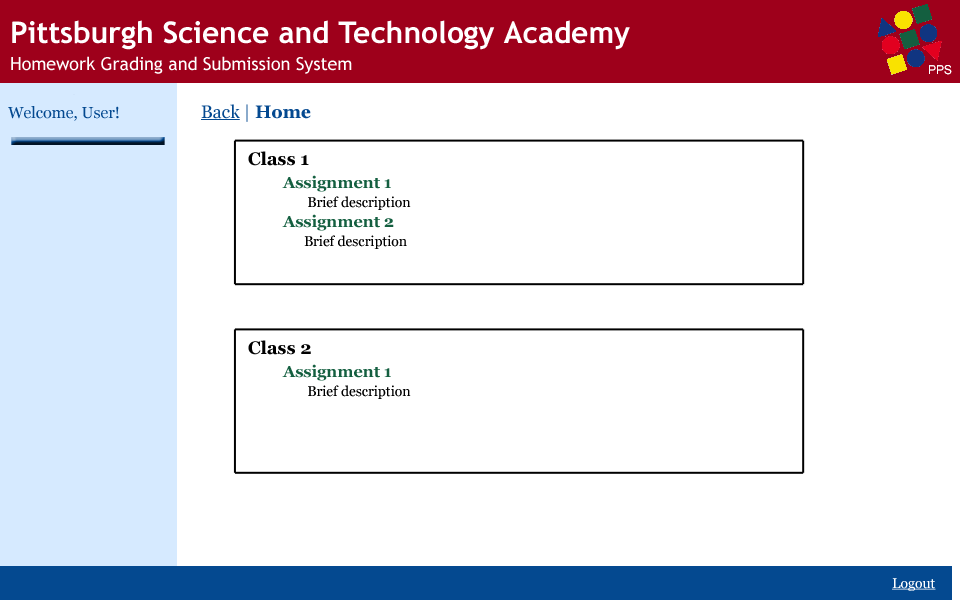
<style>
.page{position:relative;width:960px;height:600px;background:#ffffff}
.page>*{position:absolute;margin:0}
.t1{font:15.9px "Georgia";color:#044990}
.t2{font:17.9px "Georgia";color:#044990;text-decoration:underline}
.t3{font:17.9px "Georgia";color:#044990}
.t4{font:17.9px "Georgia-Bold";color:#044990}
.t5{font:17.9px "Georgia-Bold";color:#000000}
.t6{font:13.9px "Georgia";color:#000000}
.t7{font:15.9px "Georgia-Bold";color:#145f40}
</style>
<div class="page">
<p class="t1" style="left:8px;top:106px;width:111px;height:15px">Welcome, User!</p>
<p class="t2" style="left:201px;top:104px;width:110px;height:18px">Back<span class="t3"> | </span><span class="t4">Home</span></p>
<p class="t5" style="left:248px;top:151px;width:61px;height:15px">Class 1</p>
<p class="t6" style="left:282px;top:175px;width:129px;height:74px"><span class="t7">Assignment 1<br>      </span>Brief description<br><span class="t7">Assignment 2<br> </span>     Brief description</p>
<p class="t5" style="left:248px;top:340px;width:63px;height:15px">Class 2</p>
<p class="t6" style="left:282px;top:364px;width:129px;height:35px"><span class="t7">Assignment 1<br>      </span>Brief description</p>
</div>
